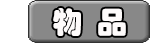
<style>
.page{position:relative;width:150px;height:43px;background:#888888}
.page>*{position:absolute;margin:0}
.t1{font:30px "STHupo";color:#fefbfb}
.t2{font:12px "STHupo";color:#000000}
</style>
<div class="page">
<p class="t1" style="left:53px;top:8px;width:73px;height:28px"><span class="t2">   </span>物  品</p>
</div>
